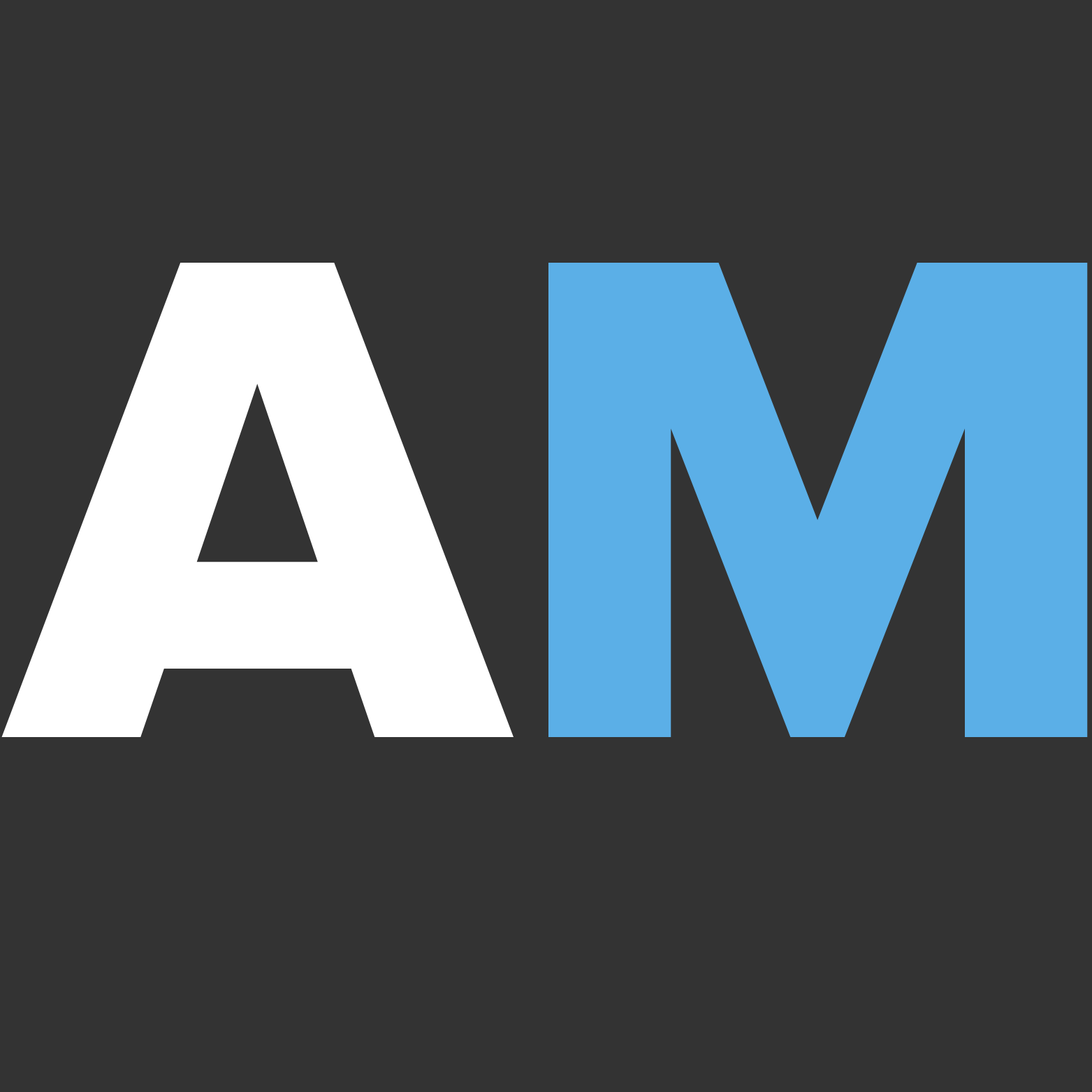
<style>
.page{position:relative;width:1092px;height:1092px;background:#333333}
.page>*{position:absolute;margin:0}
.t1{font:711.7px "ProximaNova-Extrabld";color:#ffffff}
.t2{font:711.7px "ProximaNova-Extrabld";color:#5bafe7}
</style>
<div class="page">
<p class="t1" style="left:1px;top:263px;width:1087px;height:474px">A<span class="t2">M</span></p>
</div>
